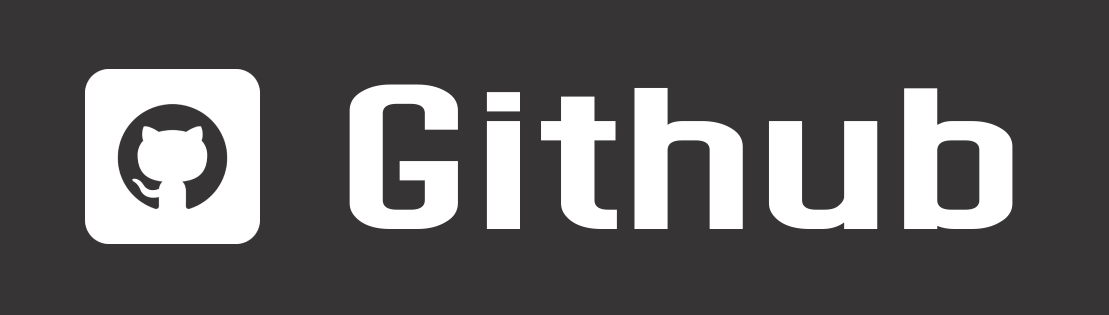
<style>
.page{position:relative;width:1109px;height:315px;background:#363434}
.page>*{position:absolute;margin:0}
.t1{font:300px "Dhurjati";color:#ffffff}
</style>
<div class="page">
<p class="t1" style="left:349px;top:84px;width:664px;height:145px">Github</p>
</div>
